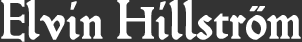
<style>
.page{position:relative;width:302px;height:42px;background:#333333}
.page>*{position:absolute;margin:0}
.t1{font:54.2px "Hamlet-Tertia18";color:#ffffff;font-weight:bold}
</style>
<div class="page">
<p class="t1" style="left:1px;top:0px;width:300px;height:42px">Elvin Hillström</p>
</div>
